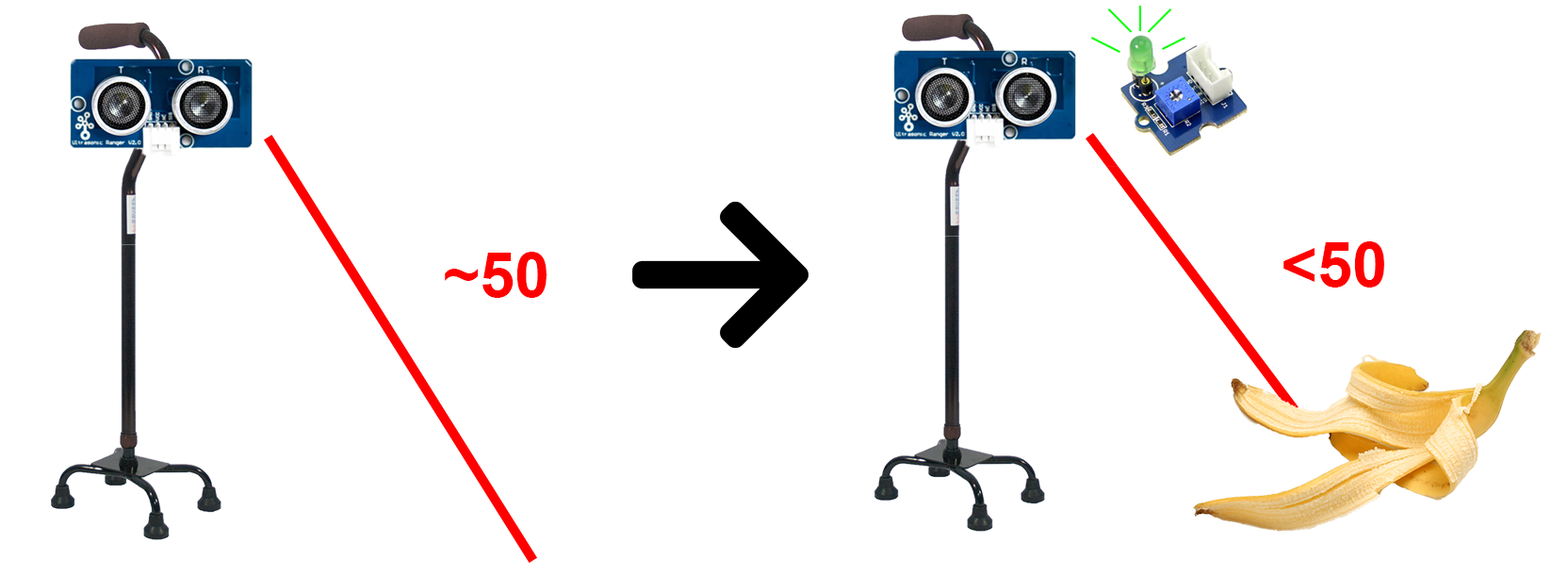
<style>
.page{position:relative;width:1568px;height:576px;background:#ffffff}
.page>*{position:absolute;margin:0}
.t1{font:62.8px "Arial-BoldMT";color:#ff0000}
</style>
<div class="page">
<p class="t1" style="left:1283px;top:241px;width:101px;height:46px">&lt;50</p>
<p class="t1" style="left:445px;top:252px;width:102px;height:46px">~50</p>
</div>
